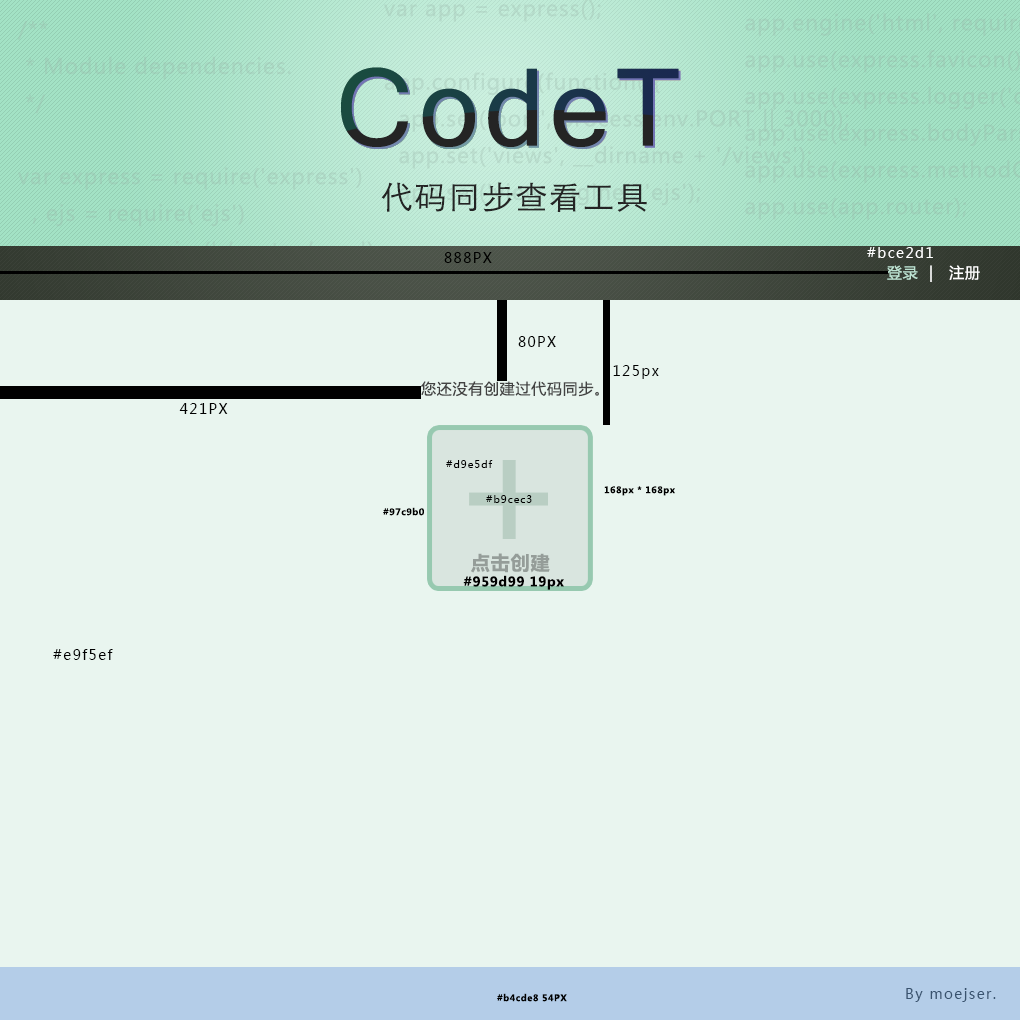
<style>
.page{position:relative;width:1020px;height:1020px;background:#e9f5ef}
.page>*{position:absolute;margin:0}
.t1{font:116px "Shruti";letter-spacing:0.05em}
.t2{font:32px "STXihei";letter-spacing:0.05em;color:#242424}
.t3{font:14px "MicrosoftYaHei";letter-spacing:0.1em;color:#000000}
.t4{font:14px "MicrosoftYaHei";letter-spacing:0.1em;color:#ffffff}
.t5{font:15px "MicrosoftYaHei";letter-spacing:0.05em;color:#ffffff}
.t6{font:15px "MicrosoftYaHei";letter-spacing:0.05em;color:#bce2d1}
.t7{font:15px "MicrosoftYaHei";letter-spacing:0.05em;color:#434343}
.t8{font:10px "MicrosoftYaHei";letter-spacing:0.1em;color:#000000}
.t9{font:9px "MicrosoftYaHei-Bold";letter-spacing:0.05em;color:#000000}
.t10{font:19.1px "MicrosoftYaHei-Bold";letter-spacing:0.05em;color:#959d99}
.t11{font:13px "MicrosoftYaHei-Bold";letter-spacing:0.05em;color:#000000}
.t12{font:14px "MicrosoftYaHei";letter-spacing:0.1em;color:#39536f}
</style>
<div class="page">
<p class="t1" style="left:341px;top:67px;width:338px;height:80px">CodeT</p>
<p class="t1" style="left:343px;top:69px;width:338px;height:80px">CodeT</p>
<p class="t2" style="left:381px;top:182px;width:266px;height:30px">代码同步查看工具</p>
<p class="t3" style="left:444px;top:252px;width:48px;height:11px">888PX</p>
<p class="t4" style="left:867px;top:247px;width:66px;height:11px">#bce2d1</p>
<p class="t5" style="left:887px;top:265px;width:93px;height:17px"><span class="t6">登录</span>  |   注册</p>
<p class="t3" style="left:518px;top:336px;width:38px;height:11px">80PX</p>
<p class="t3" style="left:613px;top:365px;width:46px;height:14px">125px</p>
<p class="t7" style="left:421px;top:381px;width:178px;height:16px">您还没有创建过代码同步。</p>
<p class="t3" style="left:179px;top:403px;width:49px;height:11px">421PX</p>
<p class="t8" style="left:446px;top:460px;width:47px;height:8px">#d9e5df</p>
<p class="t9" style="left:604px;top:486px;width:71px;height:10px">168px * 168px</p>
<p class="t8" style="left:486px;top:495px;width:46px;height:8px">#b9cec3</p>
<p class="t9" style="left:383px;top:507px;width:41px;height:9px">#97c9b0</p>
<p class="t10" style="left:471px;top:553px;width:79px;height:20px">点击创建</p>
<p class="t11" style="left:463px;top:575px;width:101px;height:15px">#959d99 19px</p>
<p class="t3" style="left:53px;top:649px;width:60px;height:11px">#e9f5ef</p>
<p class="t12" style="left:906px;top:988px;width:90px;height:14px">By moejser.</p>
<p class="t9" style="left:497px;top:993px;width:70px;height:9px">#b4cde8 54PX</p>
</div>
